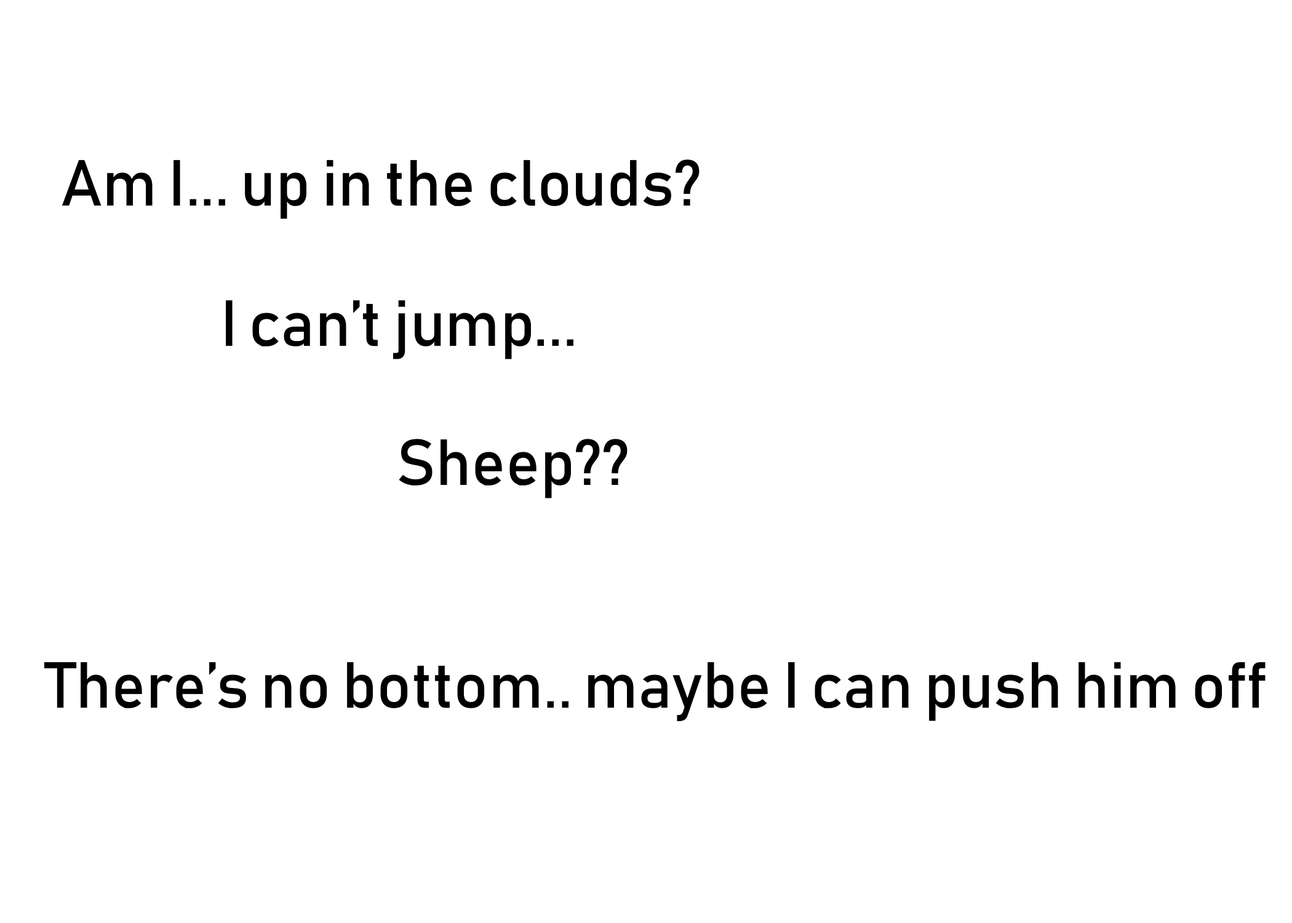
<style>
.page{position:relative;width:1292px;height:923px;background:#ffffff}
.page>*{position:absolute;margin:0}
.t1{font:64.1px "Bahnschrift";color:#000000}
</style>
<div class="page">
<p class="t1" style="left:62px;top:159px;width:638px;height:60px">Am I... up in the clouds?</p>
<p class="t1" style="left:226px;top:300px;width:347px;height:59px">I can’t jump...</p>
<p class="t1" style="left:399px;top:439px;width:229px;height:59px">Sheep??</p>
<p class="t1" style="left:44px;top:662px;width:1222px;height:59px">There’s no bottom.. maybe I can push him off</p>
</div>
